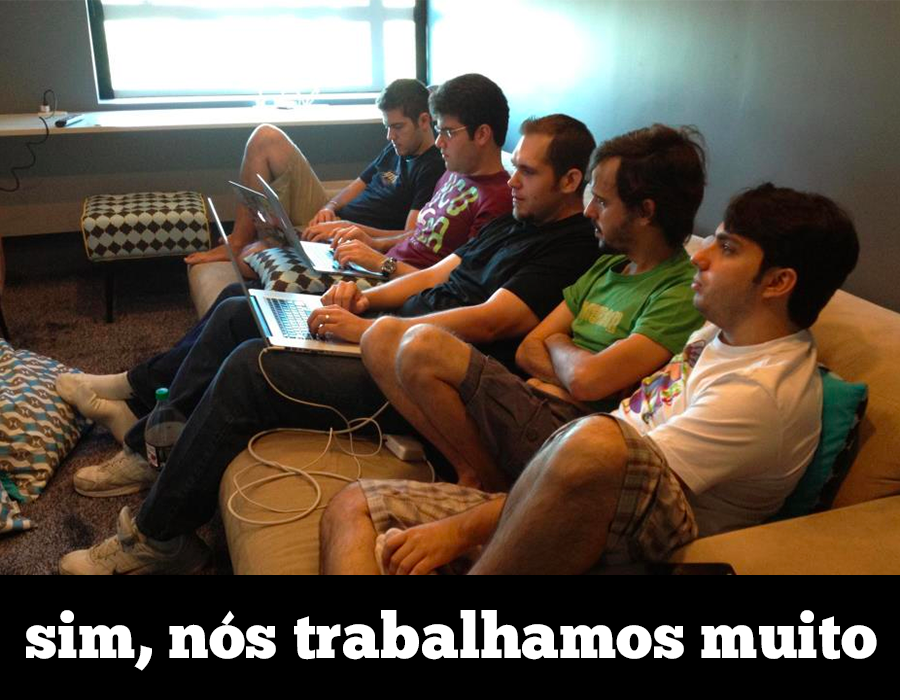
<style>
.page{position:relative;width:900px;height:700px}
.page>*{position:absolute;margin:0}
.t1{font:64px "ChunkFive-Roman";color:#ffffff}
</style>
<div class="page">
<p class="t1" style="left:26px;top:610px;width:851px;height:61px">sim, nós trabalhamos muito</p>
</div>
